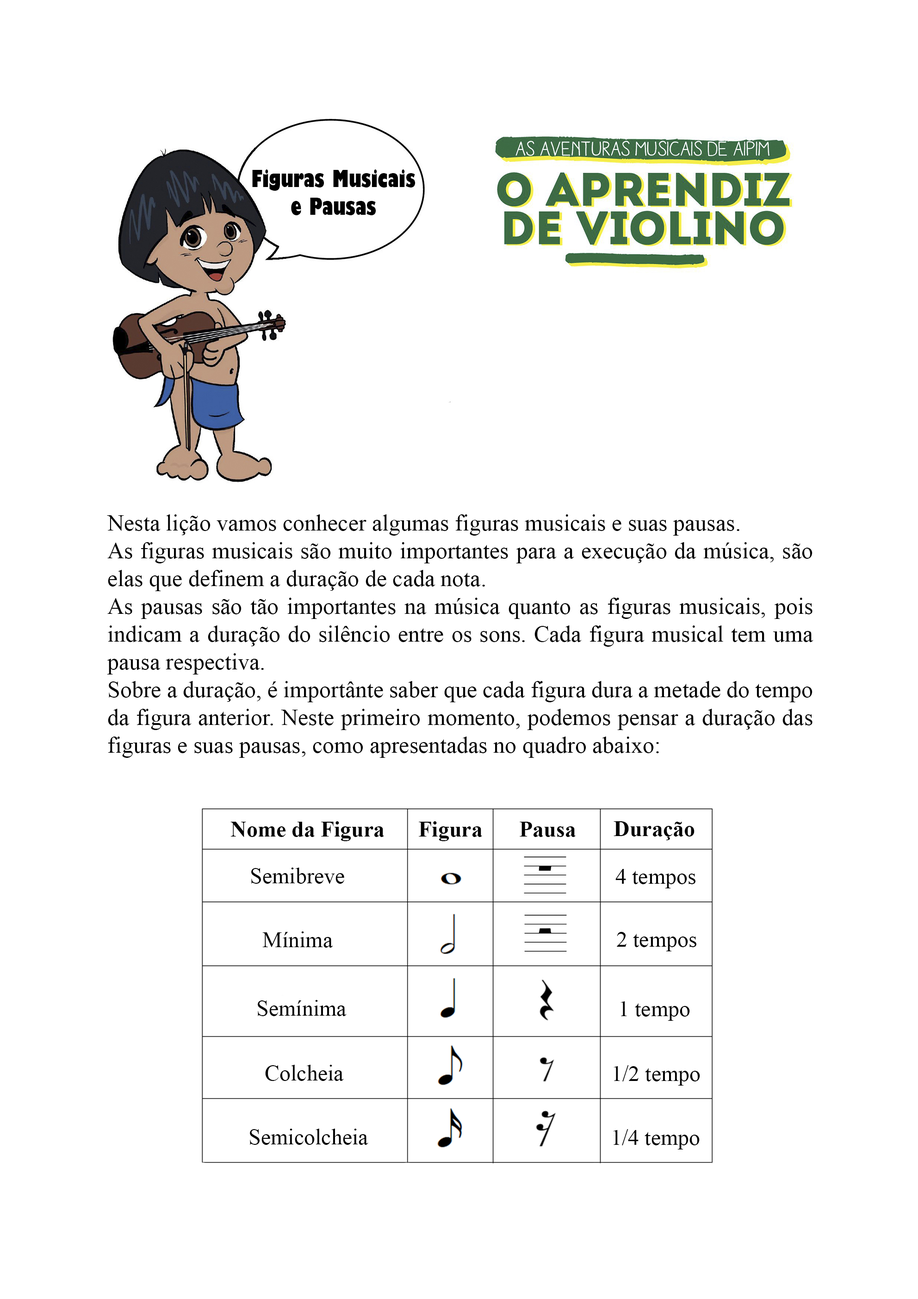
<style>
.page{position:relative;width:918px;height:1299px;background:#ffffff}
.page>*{position:absolute;margin:0}
.t1{font:23.1px "TimesNewRomanPSMT";color:#010101}
</style>
<div class="page">
<p class="t1" style="left:107px;top:514px;width:707px;height:244px;text-align:justify">Nesta lição vamos conhecer algumas figuras musicais e suas pausas. <br>As figuras musicais são muito importantes para a execução da música, são elas que definem a duração de cada nota. <br>As pausas são tão importantes na música quanto as figuras musicais, pois   indicam a duração do silêncio entre os sons. Cada figura musical tem uma pausa respectiva. <br>Sobre a duração, é importânte saber que cada figura dura a metade do tempo da figura anterior. Neste primeiro momento, podemos pensar a duração das figuras e suas pausas, como apresentadas no quadro abaixo:</p>
</div>
